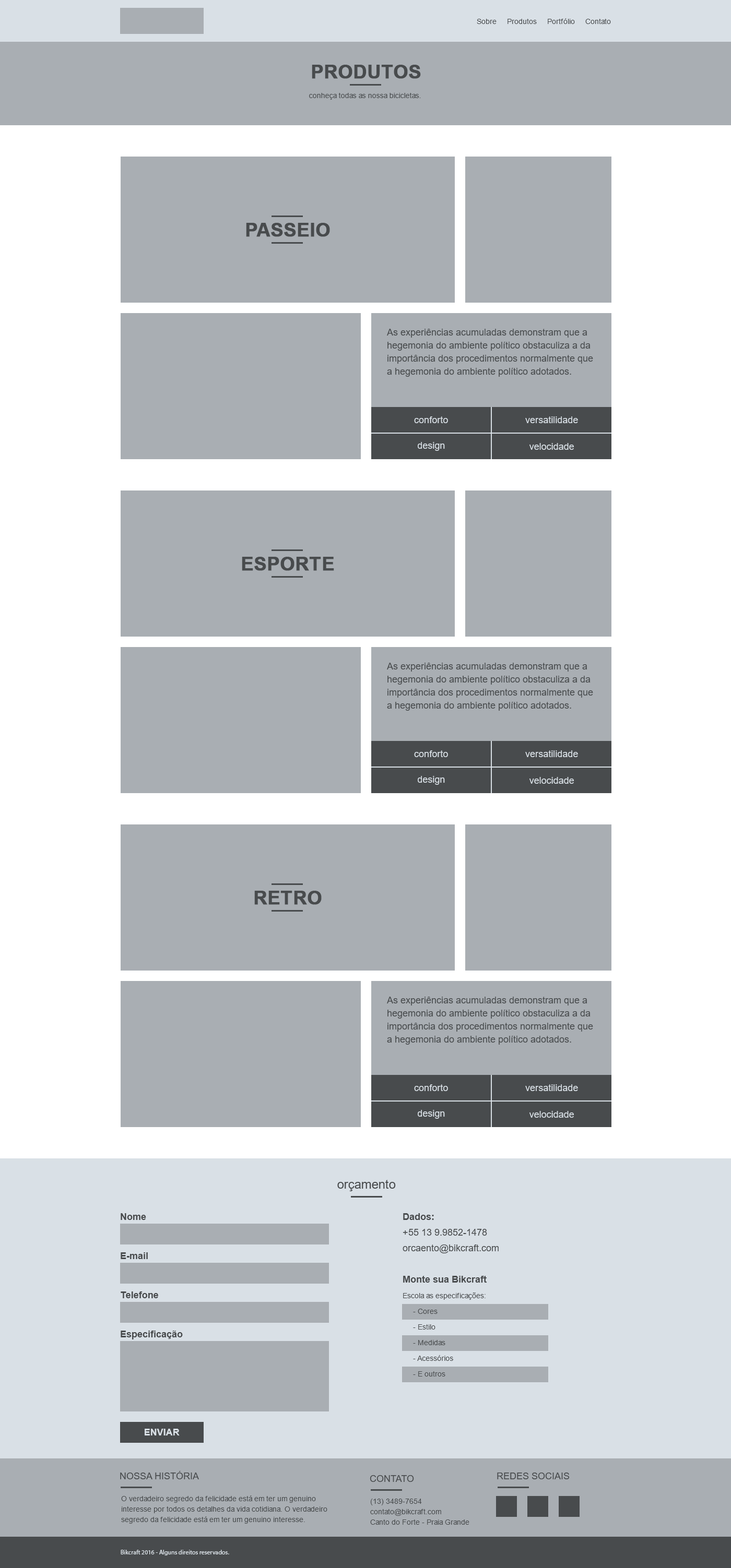
<style>
.page{position:relative;width:731px;height:1568px;background:#a9aeb3}
.page>*{position:absolute;margin:0}
.t1{font:7.3px "ArialMT";color:#484b4d}
.t2{font:18.8px "Arial-BoldMT";color:#484b4d;text-transform:uppercase;font-weight:bold}
.t3{font:9.4px/13px "ArialMT";color:#484b4d}
.t4{font:9.4px "ArialMT";color:#d9e0e6}
.t5{font:12.5px "ArialMT";color:#484b4d}
.t6{font:9.4px "Arial-BoldMT";color:#484b4d}
.t7{font:7.3px/15.7px "ArialMT";color:#484b4d}
.t8{font:9.4px/15.7px "Arial-BoldMT";color:#484b4d}
.t9{font:9.4px/15.7px "ArialMT";color:#484b4d}
.t10{font:9.4px "Arial-BoldMT";color:#d9e0e6}
.t11{font:9.4px "ArialMT";color:#484b4d;text-transform:uppercase}
.t12{font:7.3px/10.4px "ArialMT";color:#484b4d}
.t13{font:6.3px "MyriadPro-Regular";color:#d9e0e6}
</style>
<div class="page">
<p class="t1" style="left:476px;top:18px;width:135px;height:6px">Sobre     Produtos     Portfólio     Contato</p>
<p class="t2" style="left:312px;top:65px;width:109px;height:14px">PRODUTOS</p>
<p class="t1" style="left:309px;top:93px;width:112px;height:7px">conheça todas as nossa bicicletas.</p>
<p class="t2" style="left:246px;top:223px;width:84px;height:14px">PASSEIO</p>
<p class="t3" style="left:387px;top:329px;width:206px;height:48px">As experiências acumuladas demonstram que a hegemonia do ambiente político obstaculiza a da importância dos procedimentos normalmente que a hegemonia do ambiente político adotados.</p>
<p class="t4" style="left:414px;top:416px;width:34px;height:7px">conforto</p>
<p class="t4" style="left:525px;top:416px;width:53px;height:7px">versatilidade</p>
<p class="t4" style="left:417px;top:442px;width:28px;height:9px">design</p>
<p class="t4" style="left:529px;top:443px;width:44px;height:7px">velocidade</p>
<p class="t2" style="left:242px;top:557px;width:92px;height:14px">esporte</p>
<p class="t3" style="left:387px;top:663px;width:206px;height:48px">As experiências acumuladas demonstram que a hegemonia do ambiente político obstaculiza a da importância dos procedimentos normalmente que a hegemonia do ambiente político adotados.</p>
<p class="t4" style="left:414px;top:750px;width:34px;height:7px">conforto</p>
<p class="t4" style="left:525px;top:750px;width:53px;height:7px">versatilidade</p>
<p class="t4" style="left:417px;top:776px;width:28px;height:9px">design</p>
<p class="t4" style="left:529px;top:777px;width:44px;height:7px">velocidade</p>
<p class="t2" style="left:254px;top:891px;width:67px;height:14px">retro</p>
<p class="t3" style="left:387px;top:997px;width:206px;height:48px">As experiências acumuladas demonstram que a hegemonia do ambiente político obstaculiza a da importância dos procedimentos normalmente que a hegemonia do ambiente político adotados.</p>
<p class="t4" style="left:414px;top:1084px;width:34px;height:7px">conforto</p>
<p class="t4" style="left:525px;top:1084px;width:53px;height:7px">versatilidade</p>
<p class="t4" style="left:417px;top:1110px;width:28px;height:9px">design</p>
<p class="t4" style="left:529px;top:1111px;width:44px;height:7px">velocidade</p>
<p class="t5" style="left:337px;top:1180px;width:59px;height:11px">orçamento</p>
<p class="t6" style="left:121px;top:1213px;width:25px;height:7px">Nome</p>
<p class="t7" style="left:402px;top:1213px;width:96px;height:164px"><span class="t8">Dados:</span><span class="t9"><br>+55 13 9.9852-1478<br>orcaento@bikcraft.com<br><br></span><span class="t8">Monte sua Bikcraft<br></span>Escola as especificações:<br>     - Cores<br>     - Estilo<br>     - Medidas<br>     - Acessórios<br>     - E outros</p>
<p class="t6" style="left:121px;top:1252px;width:27px;height:7px">E-mail</p>
<p class="t6" style="left:121px;top:1291px;width:37px;height:7px">Telefone</p>
<p class="t6" style="left:121px;top:1331px;width:62px;height:8px">Especificação</p>
<p class="t10" style="left:145px;top:1429px;width:34px;height:6px">ENVIAR</p>
<p class="t11" style="left:120px;top:1471px;width:79px;height:8px">Nossa História</p>
<p class="t11" style="left:369px;top:1475px;width:45px;height:7px">Contato</p>
<p class="t11" style="left:497px;top:1473px;width:72px;height:6px">redes sociais</p>
<p class="t12" style="left:121px;top:1495px;width:206px;height:29px">O verdadeiro segredo da felicidade está em ter um genuino<br>interesse por todos os detalhes da vida cotidiana. O verdadeiro segredo da felicidade está em ter um genuino interesse.</p>
<p class="t12" style="left:370px;top:1499px;width:99px;height:26px">(13) 3489-7654<br>contato@bikcraft.com<br>Canto do Forte - Praia Grande</p>
<p class="t13" style="left:121px;top:1550px;width:108px;height:5px">Bikcraft 2016 - Alguns direitos reservados.</p>
</div>
